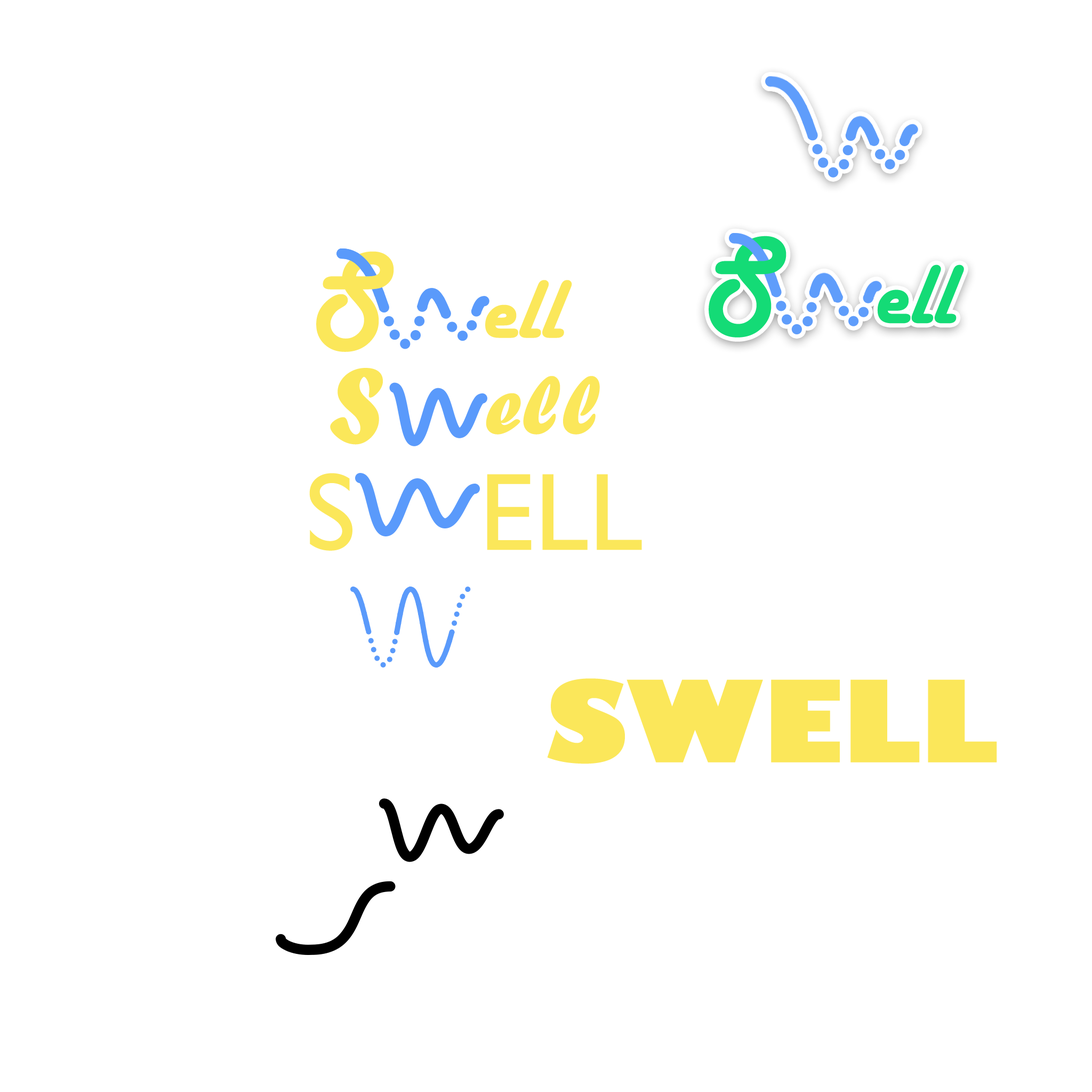
<style>
.page{position:relative;width:1092px;height:1092px;background:#ffffff}
.page>*{position:absolute;margin:0}
.t1{font:111.8px "HarlowSolid";color:#14db76}
.t2{font:110.7px "HarlowSolid";color:#fbe75a}
.t3{font:87.4px "HarlowSolid";color:#14db76}
.t4{font:86.5px "HarlowSolid";color:#fbe75a}
.t5{font:110.7px "ForteMT";color:#fbe75a}
.t6{font:86.5px "ForteMT";color:#fbe75a}
.t7{font:110.6px "GillSansMT";color:#fbe75a}
.t8{font:110.7px "GillSans-UltraBold";color:#fbe75a}
</style>
<div class="page">
<p class="t1" style="left:709px;top:236px;width:77px;height:102px">S</p>
<p class="t2" style="left:316px;top:251px;width:78px;height:101px">S</p>
<p class="t3" style="left:877px;top:264px;width:87px;height:60px">ell</p>
<p class="t4" style="left:485px;top:280px;width:87px;height:58px">ell</p>
<p class="t5" style="left:330px;top:368px;width:53px;height:77px">S</p>
<p class="t6" style="left:486px;top:376px;width:114px;height:59px">ell</p>
<p class="t7" style="left:309px;top:473px;width:333px;height:78px">S    ELL</p>
<p class="t8" style="left:547px;top:678px;width:450px;height:86px">SWELL</p>
</div>
